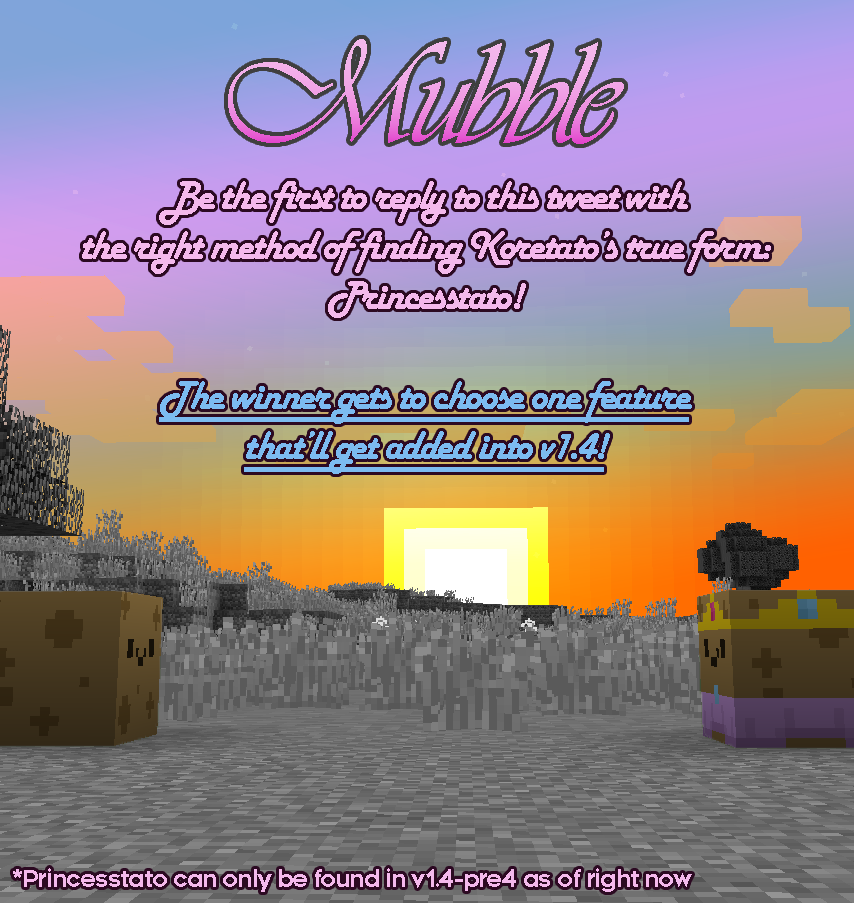
<style>
.page{position:relative;width:854px;height:903px}
.page>*{position:absolute;margin:0}
.t1{font:150px "Vivaldii";letter-spacing:-0.05em}
.t2{font:41.7px "HarlowSolid";letter-spacing:-0.05em;color:#f4b9ec}
.t3{font:41.7px "HarlowSolid";letter-spacing:-0.05em;color:#7cbbf0;text-decoration:underline}
.t4{font:24px "Renogare-Regular";letter-spacing:-0.05em;color:#f4b9ec}
</style>
<div class="page">
<p class="t1" style="left:228px;top:39px;width:396px;height:105px">Mubble</p>
<p class="t2" style="left:82px;top:181px;width:689px;height:293px;text-align:center">Be the first to reply to this tweet with<br>the right method of finding Koretato’s true form:<br>Princesstato!<br><br><span class="t3">The winner gets to choose one feature<br>that’ll get added into v1.4!</span></p>
<p class="t4" style="left:13px;top:868px;width:679px;height:24px">*Princesstato can only be found in v1.4-pre4 as of right now</p>
</div>
